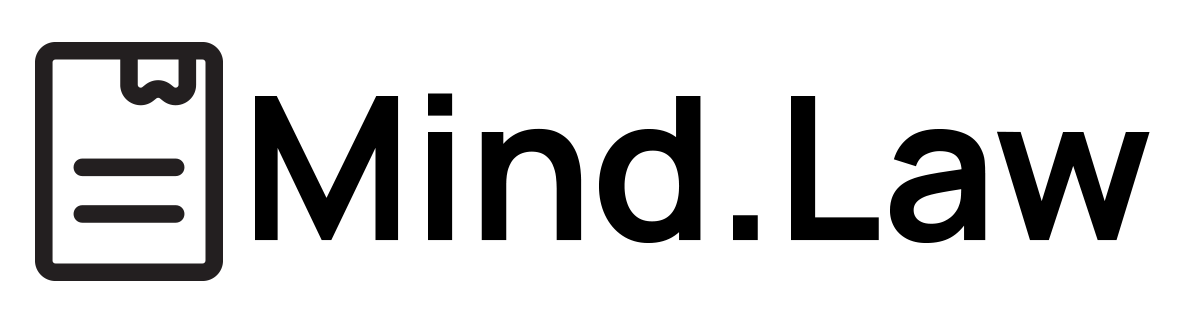
<style>
.page{position:relative;width:1198px;height:317px;background:#ffffff}
.page>*{position:absolute;margin:0}
.t1{font:200px "Manrope-Bold";color:#000000}
</style>
<div class="page">
<p class="t1" style="left:255px;top:93px;width:895px;height:150px">Mind.Law</p>
</div>
